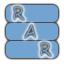
<style>
.page{position:relative;width:64px;height:64px;background:#73a4d1}
.page>*{position:absolute;margin:0}
.t1{font:19px "SegoeScript";color:#73a4d1;scale:0.79 1}
</style>
<div class="page">
<p class="t1" style="left:13px;top:6px;width:12px;height:15px">R</p>
<p class="t1" style="left:24px;top:24px;width:12px;height:15px">A</p>
<p class="t1" style="left:40px;top:42px;width:12px;height:15px">R</p>
</div>
